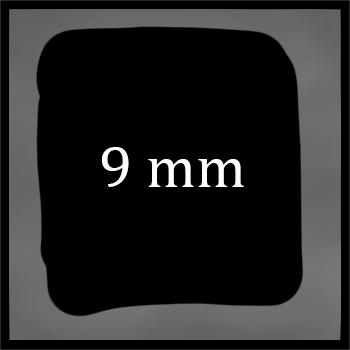
<style>
.page{position:relative;width:350px;height:350px;background:#000000}
.page>*{position:absolute;margin:0}
.t1{font:60px "Cambria";color:#ffffff}
</style>
<div class="page">
<p class="t1" style="left:102px;top:147px;width:142px;height:40px">9 mm</p>
</div>
